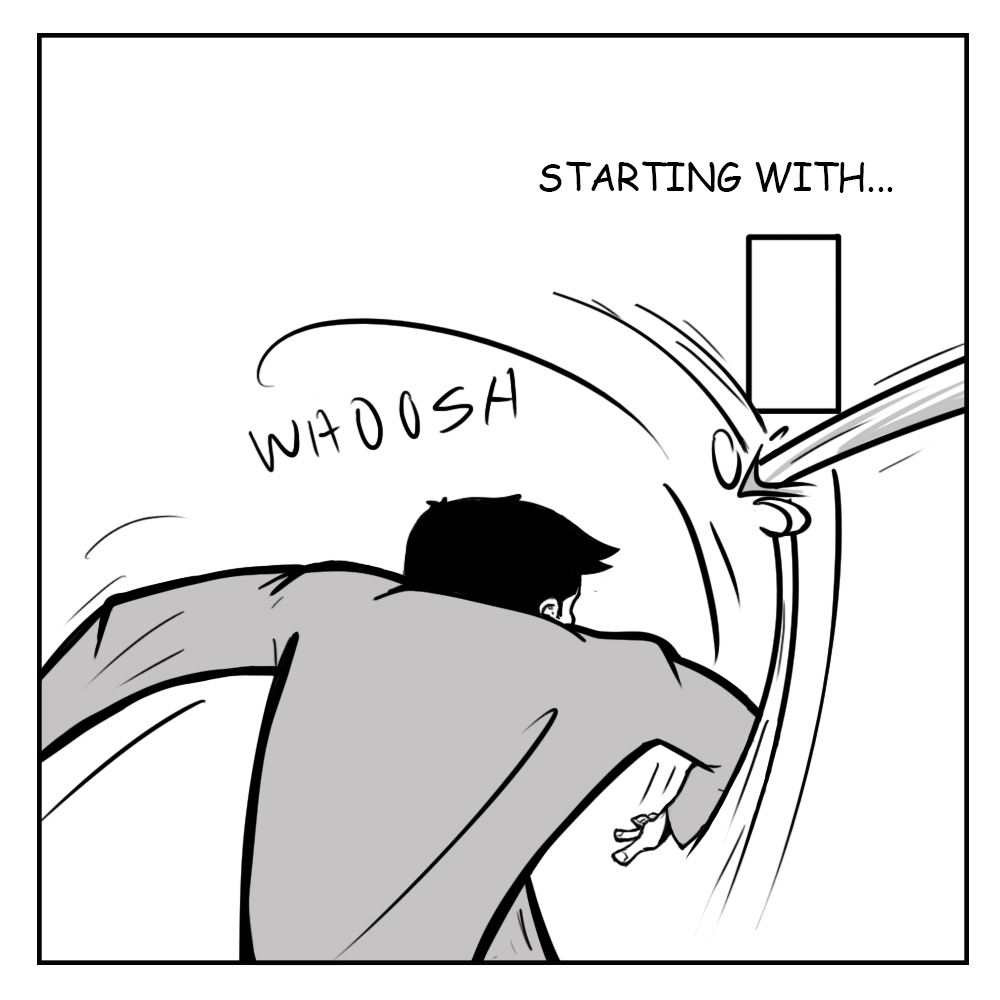
<style>
.page{position:relative;width:1000px;height:1000px;background:#ffffff}
.page>*{position:absolute;margin:0}
.t1{font:37.5px "ComicSansMS";color:#000000;text-transform:uppercase}
</style>
<div class="page">
<p class="t1" style="left:539px;top:161px;width:354px;height:32px">Starting with...</p>
</div>
